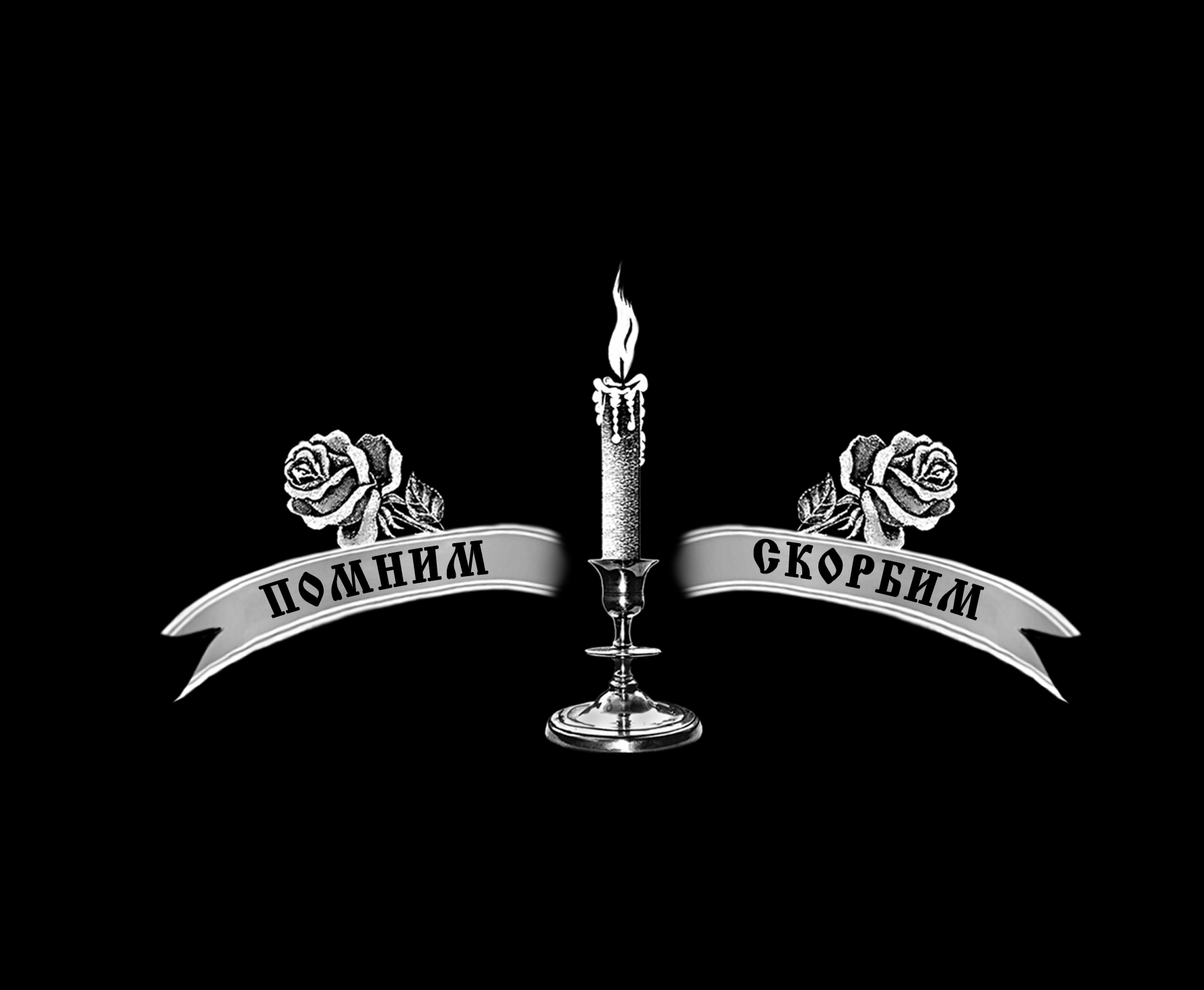
<style>
.page{position:relative;width:1204px;height:990px;background:#000000}
.page>*{position:absolute;margin:0}
.t1{font:48.5px "CyrillicOld";letter-spacing:0.1em;color:#000000;scale:0.83 1}
</style>
<div class="page">
<p class="t1" style="left:259px;top:541px;width:229px;height:77px;rotate:-12deg">ПОМНИМ</p>
<p class="t1" style="left:754px;top:539px;width:230px;height:81px;rotate:12deg">СКОРБИМ</p>
</div>
